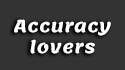
<style>
.page{position:relative;width:125px;height:70px;background:#333333}
.page>*{position:absolute;margin:0}
.t1{font:17.1px/21.6px "Lemonada-Bold";letter-spacing:0.04em;color:#ffffff}
</style>
<div class="page">
<p class="t1" style="left:14px;top:19px;width:97px;height:35px;text-align:center">Accuracy<br>lovers</p>
</div>
